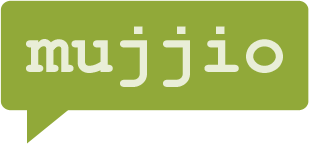
<style>
.page{position:relative;width:309px;height:144px;background:#91a939}
.page>*{position:absolute;margin:0}
.t1{font:71.7px "CourierNewPS-BoldMT";color:#e9eed7}
</style>
<div class="page">
<p class="t1" style="left:26px;top:26px;width:257px;height:61px">mujjio</p>
</div>
